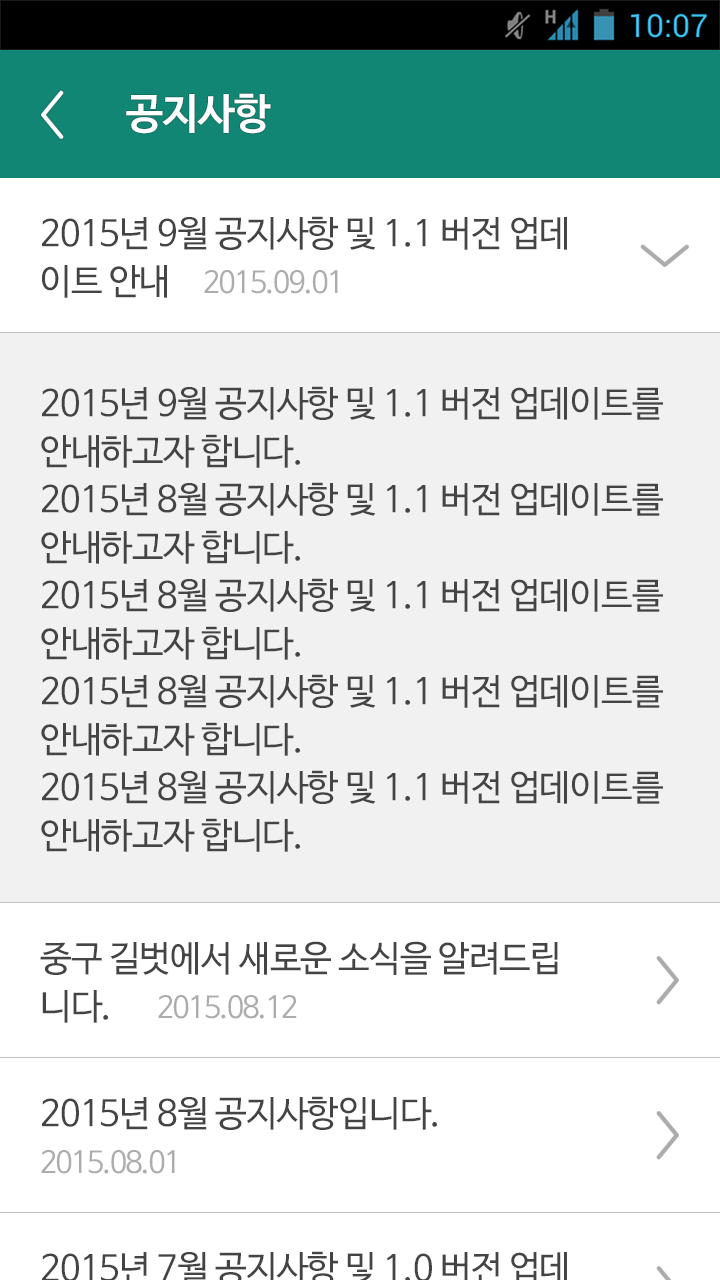
<style>
.page{position:relative;width:720px;height:1280px;background:#ffffff}
.page>*{position:absolute;margin:0}
.t1{font:42px "NanumBarunGothicOTFBold";letter-spacing:-0.02em;color:#ffffff}
.t2{font:36px/48px "NanumBarunGothicOTF";letter-spacing:-0.02em;color:#444444}
.t3{font:30px "NanumBarunGothicOTF";letter-spacing:-0.05em;color:#acacac}
.t4{font:36px "NanumBarunGothicOTF";letter-spacing:-0.02em;color:#444444}
</style>
<div class="page">
<p class="t1" style="left:126px;top:93px;width:145px;height:41px">공지사항</p>
<p class="t2" style="left:41px;top:216px;width:526px;height:82px">2015년 9월 공지사항 및 1.1 버전 업데<br>이트 안내</p>
<p class="t3" style="left:204px;top:270px;width:134px;height:24px">2015.09.01</p>
<p class="t2" style="left:41px;top:386px;width:622px;height:466px">2015년 9월 공지사항 및 1.1 버전 업데이트를<br>안내하고자 합니다.<br>2015년 8월 공지사항 및 1.1 버전 업데이트를<br>안내하고자 합니다.<br>2015년 8월 공지사항 및 1.1 버전 업데이트를<br>안내하고자 합니다.<br>2015년 8월 공지사항 및 1.1 버전 업데이트를<br>안내하고자 합니다.<br>2015년 8월 공지사항 및 1.1 버전 업데이트를<br>안내하고자 합니다.</p>
<p class="t2" style="left:40px;top:941px;width:518px;height:82px">중구 길벗에서 새로운 소식을 알려드립<br>니다.</p>
<p class="t3" style="left:158px;top:995px;width:139px;height:24px">2015.08.12</p>
<p class="t4" style="left:42px;top:1096px;width:395px;height:34px">2015년 8월 공지사항입니다.</p>
<p class="t3" style="left:41px;top:1150px;width:134px;height:24px">2015.08.01</p>
</div>
